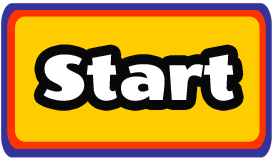
<style>
.page{position:relative;width:272px;height:158px;background:#ffcc00}
.page>*{position:absolute;margin:0}
.t1{font:73.6px "WendyOne-Regular";color:#ffffff;scale:1.09 1}
</style>
<div class="page">
<p class="t1" style="left:43px;top:54px;width:191px;height:47px">Start</p>
</div>
